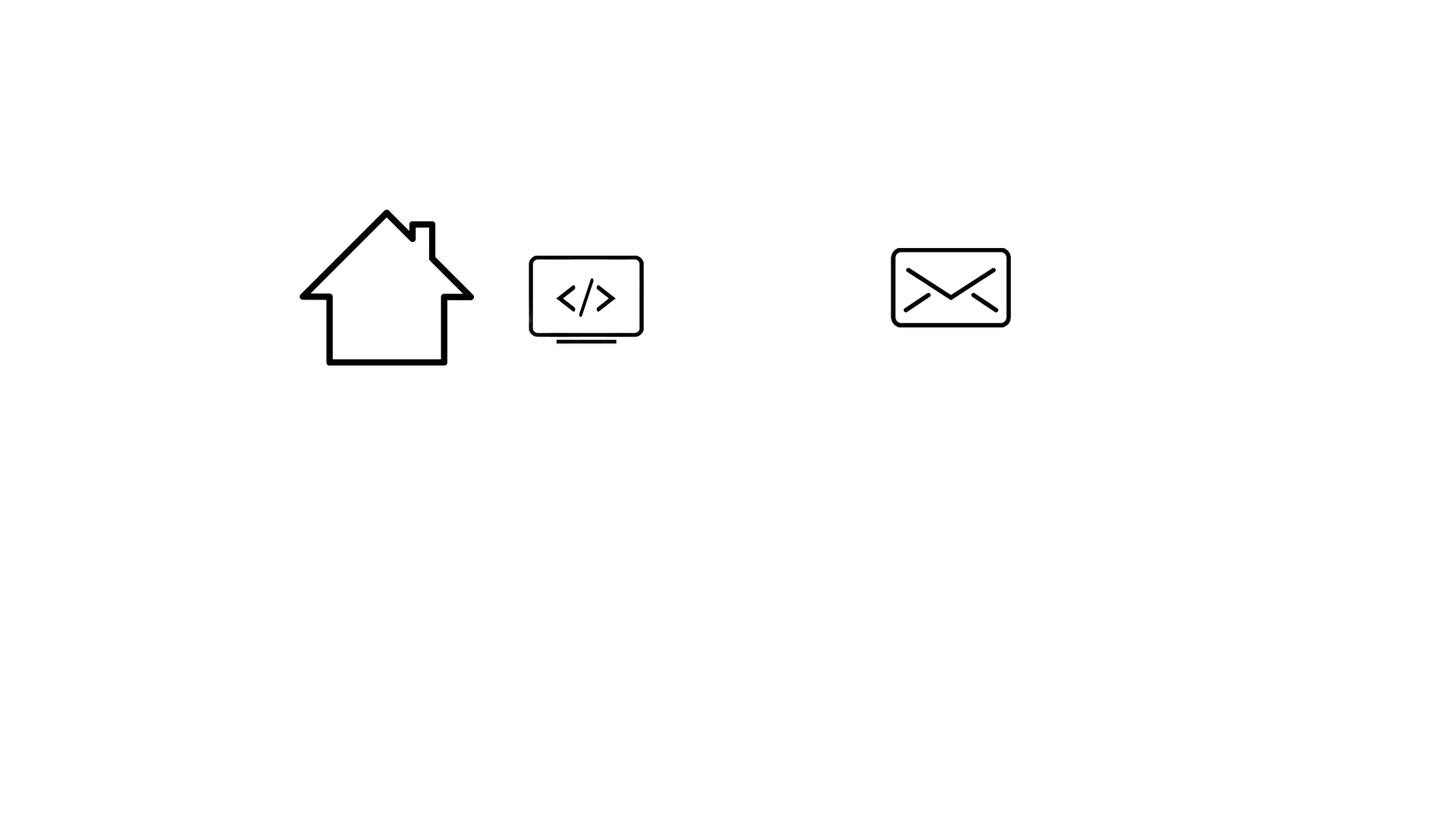
<style>
.page{position:relative;width:1456px;height:819px;background:#ffffff}
.page>*{position:absolute;margin:0}
.t1{font:46.8px "CourierNewPS-BoldMT";letter-spacing:-0.02em;color:#000000;scale:0.72 1}
</style>
<div class="page">
<p class="t1" style="left:556px;top:278px;width:60px;height:39px">&lt;/&gt;</p>
</div>
